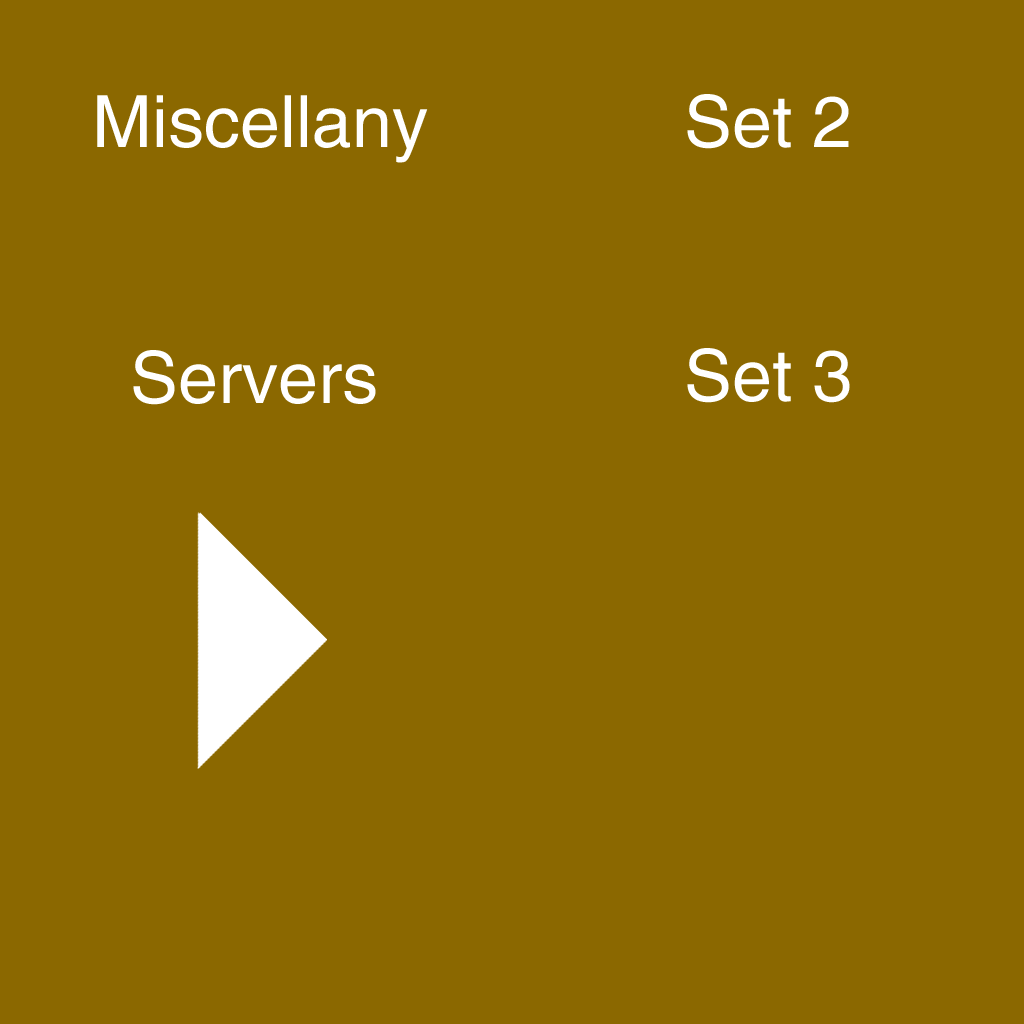
<style>
.page{position:relative;width:1024px;height:1024px;background:#8b6800}
.page>*{position:absolute;margin:0}
.t1{font:72px "Helvetica";color:#ffffff}
</style>
<div class="page">
<p class="t1" style="left:97px;top:95px;width:331px;height:68px">Miscellany</p>
<p class="t1" style="left:687px;top:94px;width:162px;height:55px">Set 2</p>
<p class="t1" style="left:133px;top:350px;width:243px;height:55px">Servers</p>
<p class="t1" style="left:687px;top:348px;width:163px;height:55px">Set 3</p>
</div>
